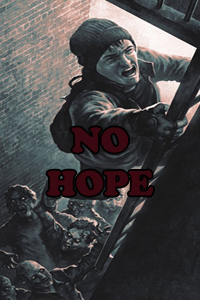
<style>
.page{position:relative;width:200px;height:300px}
.page>*{position:absolute;margin:0}
.t1{font:36px "CooperBlack";color:#3a0810}
</style>
<div class="page">
<p class="t1" style="left:47px;top:127px;width:106px;height:69px;text-align:center">NO<br>HOPE</p>
</div>
